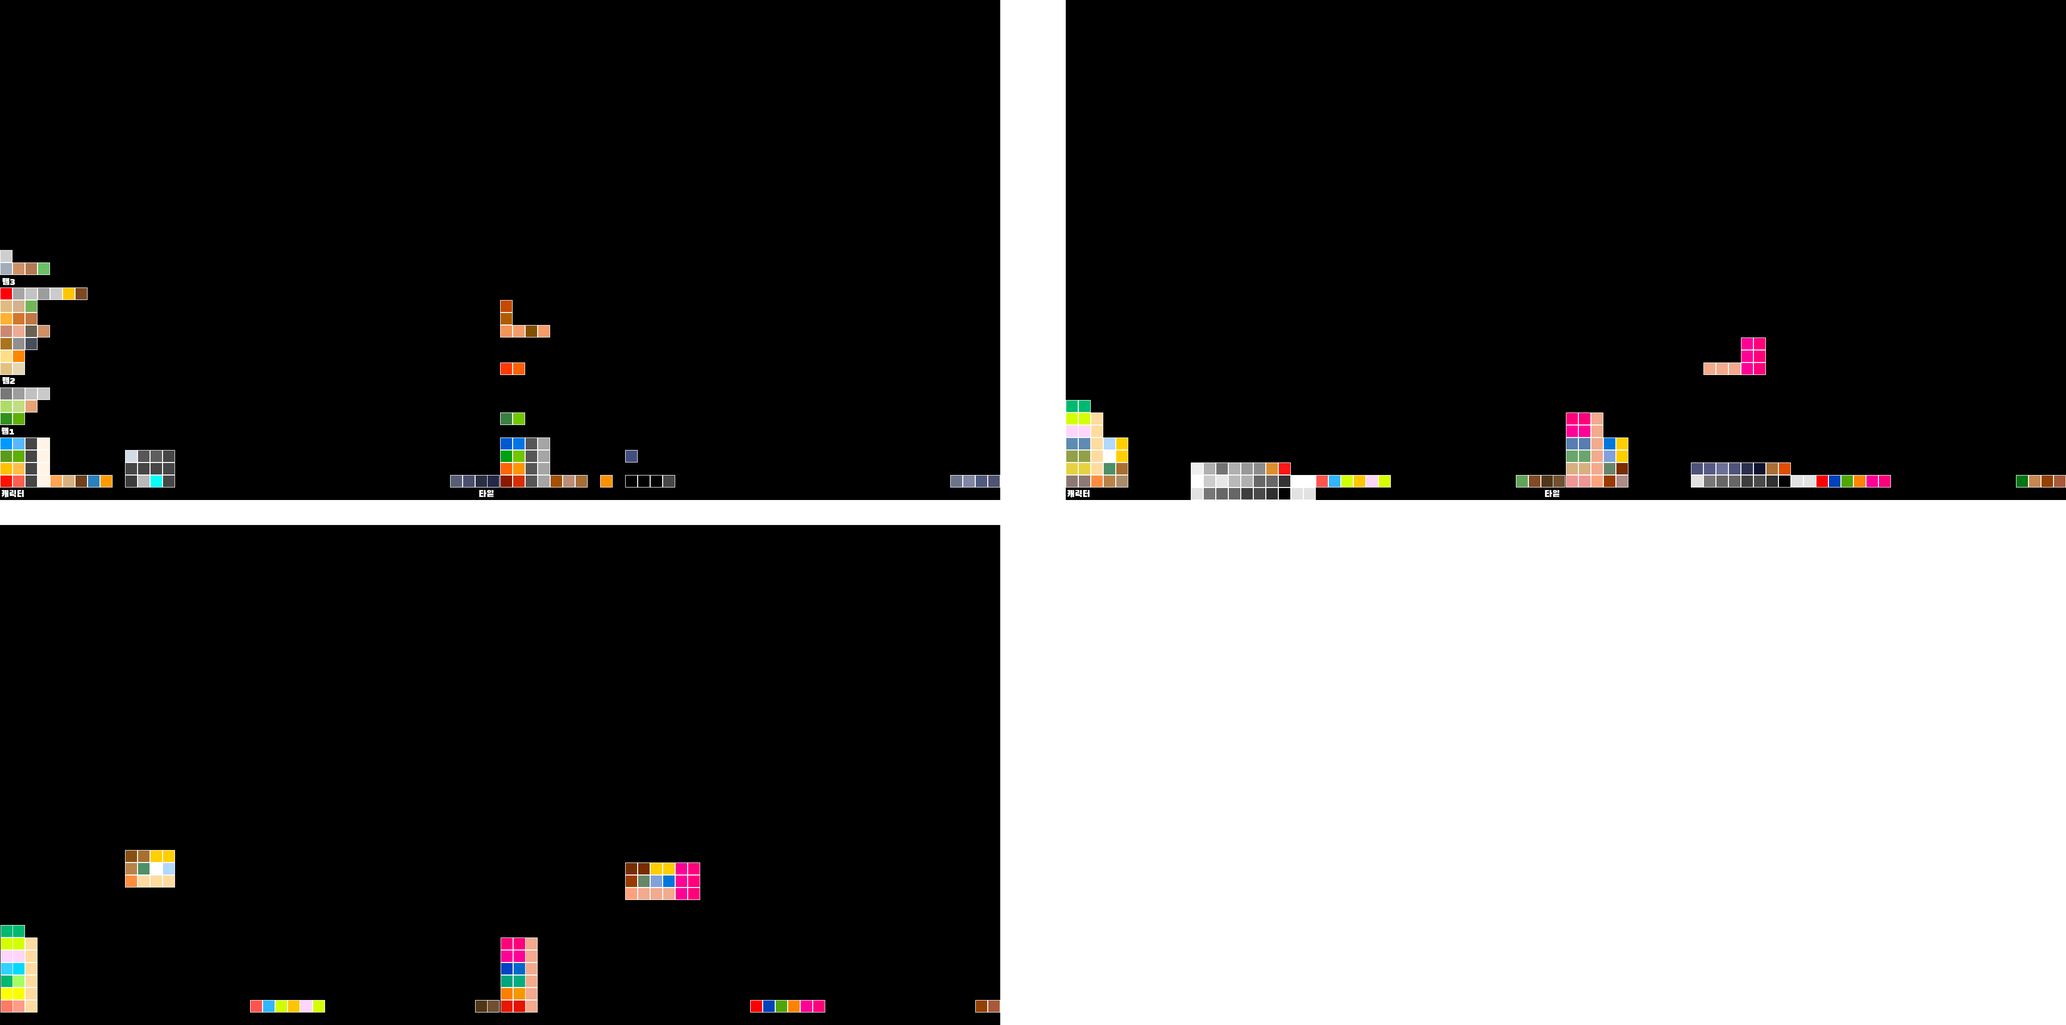
<style>
.page{position:relative;width:2066px;height:1025px;background:#000000}
.page>*{position:absolute;margin:0}
.t1{font:9px "BlackHanSans-Regular";letter-spacing:0.03em;color:#ffffff}
</style>
<div class="page">
<p class="t1" style="left:2px;top:278px;width:13px;height:7px">맵3</p>
<p class="t1" style="left:2px;top:377px;width:13px;height:7px">맵2</p>
<p class="t1" style="left:2px;top:428px;width:12px;height:6px">맵1</p>
<p class="t1" style="left:2px;top:490px;width:22px;height:8px">캐릭터</p>
<p class="t1" style="left:479px;top:490px;width:15px;height:7px">타일</p>
<p class="t1" style="left:1067px;top:490px;width:23px;height:8px">캐릭터</p>
<p class="t1" style="left:1544px;top:490px;width:15px;height:7px">타일</p>
</div>
